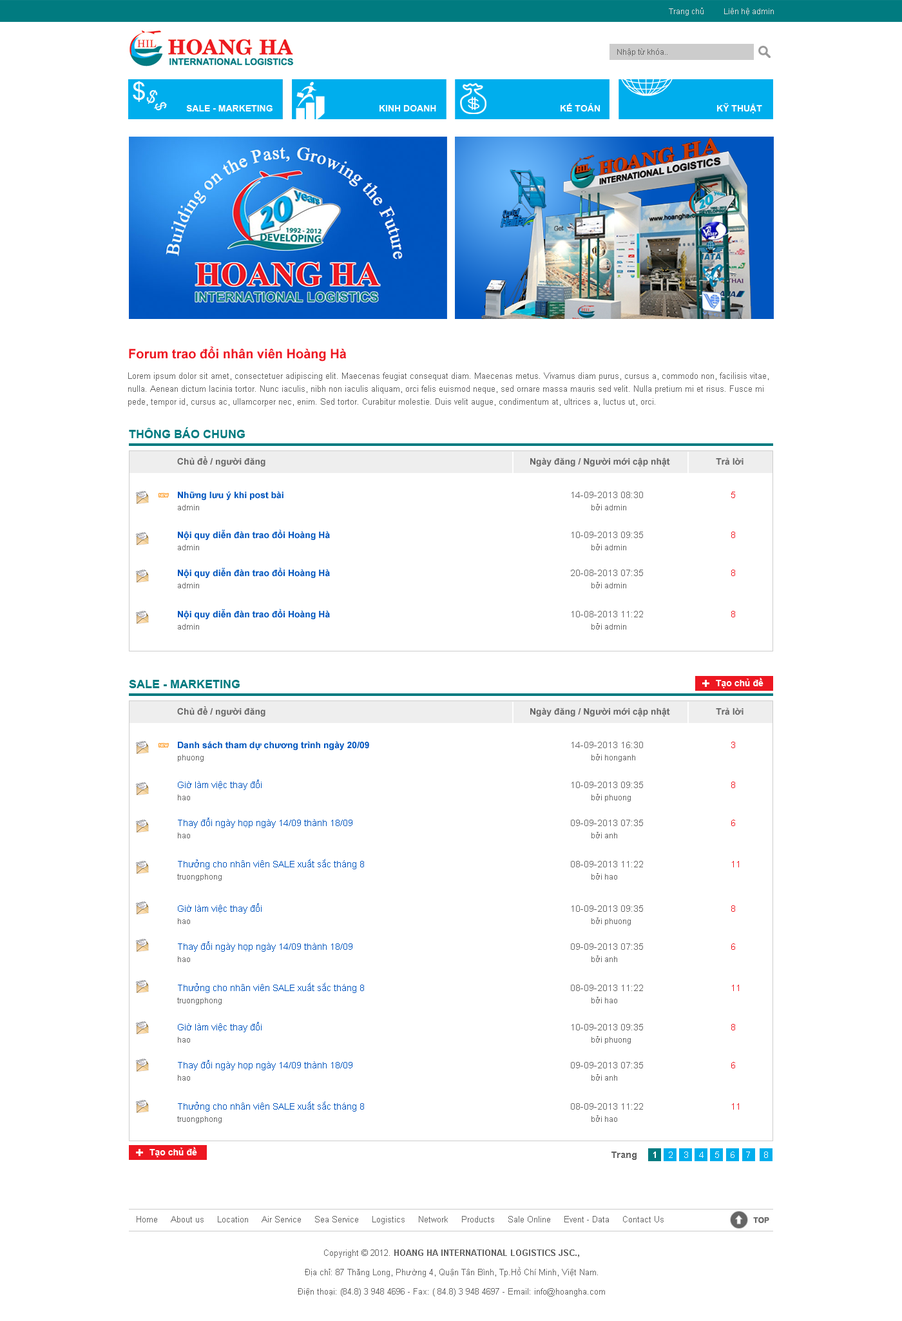
<style>
.page{position:relative;width:902px;height:1321px;background:#ffffff}
.page>*{position:absolute;margin:0}
.t1{font:7.7px "ArialMT";color:#dddddd}
.t2{font:7.7px "ArialMT";color:#666666}
.t3{font:9px "Arial-BoldMT";color:#ffffff}
.t4{font:12.9px "Arial-BoldMT";color:#ed1721}
.t5{font:8.4px/12.9px "ArialMT";color:#666666}
.t6{font:11.6px "Arial-BoldMT";color:#017b80}
.t7{font:9px "Arial-BoldMT";color:#666666}
.t8{font:9px "Arial-BoldMT";color:#0055be}
.t9{font:9px "ArialMT";color:#666666}
.t10{font:9px "ArialMT";color:#f01e27}
.t11{font:15.5px "Arial-BoldMT";color:#fefefe}
.t12{font:9px "Arial-BoldMT";color:#fefefe}
.t13{font:9px "ArialMT";color:#0055be}
.t14{font:9px "ArialMT";color:#ffffff}
.t15{font:8.4px "ArialMT";color:#666666}
.t16{font:8.4px/12.9px "Arial-BoldMT";color:#666666}
</style>
<div class="page">
<p class="t1" style="left:669px;top:8px;width:105px;height:7px">Trang chủ          Liên hệ admin</p>
<p class="t2" style="left:618px;top:48px;width:50px;height:8px">Nhập từ khóa..</p>
<p class="t3" style="left:186px;top:105px;width:87px;height:7px">SALE - MARKETING</p>
<p class="t3" style="left:380px;top:105px;width:56px;height:7px">KINH DOANH</p>
<p class="t3" style="left:561px;top:103px;width:40px;height:9px">KẾ TOÁN</p>
<p class="t3" style="left:717px;top:103px;width:46px;height:10px">KỸ THUẬT</p>
<p class="t4" style="left:129px;top:346px;width:218px;height:16px">Forum trao đổi nhân viên Hoàng Hà</p>
<p class="t5" style="left:128px;top:373px;width:641px;height:34px">Lorem ipsum dolor sit amet, consectetuer adipiscing elit. Maecenas feugiat consequat diam. Maecenas metus. Vivamus diam purus, cursus a, commodo non, facilisis vitae, nulla. Aenean dictum lacinia tortor. Nunc iaculis, nibh non iaculis aliquam, orci felis euismod neque, sed ornare massa mauris sed velit. Nulla pretium mi et risus. Fusce mi pede, tempor id, cursus ac, ullamcorper nec, enim. Sed tortor. Curabitur molestie. Duis velit augue, condimentum at, ultrices a, luctus ut, orci.</p>
<p class="t6" style="left:129px;top:427px;width:116px;height:11px">THÔNG BÁO CHUNG</p>
<p class="t7" style="left:177px;top:456px;width:89px;height:11px">Chủ đề / người đăng</p>
<p class="t7" style="left:530px;top:458px;width:140px;height:9px">Ngày đăng / Người mới cập nhật</p>
<p class="t7" style="left:716px;top:458px;width:28px;height:7px">Trả lời</p>
<p class="t8" style="left:178px;top:491px;width:106px;height:9px">Những lưu ý khi post bài</p>
<p class="t9" style="left:572px;top:492px;width:71px;height:6px">14-09-2013 08:30</p>
<p class="t10" style="left:732px;top:492px;width:3px;height:6px">5</p>
<p class="t2" style="left:178px;top:505px;width:21px;height:6px">admin</p>
<p class="t2" style="left:592px;top:504px;width:35px;height:7px">bởi admin</p>
<p class="t8" style="left:178px;top:530px;width:152px;height:10px">Nội quy diễn đàn trao đổi Hoàng Hà</p>
<p class="t9" style="left:572px;top:532px;width:71px;height:6px">10-09-2013 09:35</p>
<p class="t10" style="left:732px;top:532px;width:3px;height:6px">8</p>
<p class="t2" style="left:178px;top:545px;width:21px;height:5px">admin</p>
<p class="t2" style="left:592px;top:544px;width:35px;height:6px">bởi admin</p>
<p class="t8" style="left:178px;top:568px;width:152px;height:10px">Nội quy diễn đàn trao đổi Hoàng Hà</p>
<p class="t9" style="left:571px;top:570px;width:72px;height:6px">20-08-2013 07:35</p>
<p class="t10" style="left:732px;top:570px;width:3px;height:6px">8</p>
<p class="t2" style="left:178px;top:583px;width:21px;height:6px">admin</p>
<p class="t2" style="left:592px;top:582px;width:35px;height:7px">bởi admin</p>
<p class="t8" style="left:178px;top:609px;width:152px;height:10px">Nội quy diễn đàn trao đổi Hoàng Hà</p>
<p class="t9" style="left:572px;top:611px;width:71px;height:7px">10-08-2013 11:22</p>
<p class="t10" style="left:732px;top:611px;width:3px;height:7px">8</p>
<p class="t2" style="left:178px;top:624px;width:21px;height:6px">admin</p>
<p class="t2" style="left:592px;top:623px;width:35px;height:7px">bởi admin</p>
<p class="t6" style="left:129px;top:680px;width:111px;height:8px">SALE - MARKETING</p>
<p class="t11" style="left:703px;top:680px;width:7px;height:7px">+</p>
<p class="t12" style="left:716px;top:678px;width:48px;height:10px">Tạo chủ đề</p>
<p class="t7" style="left:177px;top:706px;width:89px;height:11px">Chủ đề / người đăng</p>
<p class="t7" style="left:530px;top:708px;width:140px;height:9px">Ngày đăng / Người mới cập nhật</p>
<p class="t7" style="left:716px;top:708px;width:28px;height:7px">Trả lời</p>
<p class="t8" style="left:178px;top:741px;width:191px;height:9px">Danh sách tham dự chương trình ngày 20/09</p>
<p class="t9" style="left:572px;top:742px;width:71px;height:6px">14-09-2013 16:30</p>
<p class="t10" style="left:732px;top:742px;width:3px;height:6px">3</p>
<p class="t2" style="left:178px;top:755px;width:26px;height:7px">phuong</p>
<p class="t2" style="left:592px;top:754px;width:44px;height:8px">bởi honganh</p>
<p class="t13" style="left:178px;top:780px;width:84px;height:10px">Giờ làm việc thay đổi</p>
<p class="t9" style="left:572px;top:782px;width:71px;height:6px">10-09-2013 09:35</p>
<p class="t10" style="left:732px;top:782px;width:3px;height:6px">8</p>
<p class="t2" style="left:178px;top:795px;width:12px;height:6px">hao</p>
<p class="t2" style="left:592px;top:794px;width:39px;height:8px">bởi phuong</p>
<p class="t13" style="left:178px;top:818px;width:175px;height:10px">Thay đổi ngày họp ngày 14/09 thành 18/09</p>
<p class="t9" style="left:571px;top:820px;width:72px;height:6px">09-09-2013 07:35</p>
<p class="t10" style="left:732px;top:820px;width:3px;height:6px">6</p>
<p class="t2" style="left:178px;top:833px;width:12px;height:6px">hao</p>
<p class="t2" style="left:592px;top:832px;width:26px;height:7px">bởi anh</p>
<p class="t13" style="left:178px;top:859px;width:186px;height:11px">Thưởng cho nhân viên SALE xuất sắc tháng 8</p>
<p class="t9" style="left:571px;top:861px;width:72px;height:7px">08-09-2013 11:22</p>
<p class="t10" style="left:732px;top:861px;width:7px;height:7px">11</p>
<p class="t2" style="left:177px;top:874px;width:45px;height:7px">truongphong</p>
<p class="t2" style="left:592px;top:873px;width:26px;height:7px">bởi hao</p>
<p class="t13" style="left:178px;top:904px;width:84px;height:10px">Giờ làm việc thay đổi</p>
<p class="t9" style="left:572px;top:906px;width:71px;height:6px">10-09-2013 09:35</p>
<p class="t10" style="left:732px;top:906px;width:3px;height:6px">8</p>
<p class="t2" style="left:592px;top:918px;width:39px;height:8px">bởi phuong</p>
<p class="t2" style="left:178px;top:919px;width:12px;height:5px">hao</p>
<p class="t13" style="left:178px;top:942px;width:175px;height:10px">Thay đổi ngày họp ngày 14/09 thành 18/09</p>
<p class="t9" style="left:571px;top:944px;width:72px;height:6px">09-09-2013 07:35</p>
<p class="t10" style="left:732px;top:944px;width:3px;height:6px">6</p>
<p class="t2" style="left:178px;top:957px;width:12px;height:5px">hao</p>
<p class="t2" style="left:592px;top:956px;width:26px;height:6px">bởi anh</p>
<p class="t13" style="left:178px;top:983px;width:186px;height:10px">Thưởng cho nhân viên SALE xuất sắc tháng 8</p>
<p class="t9" style="left:571px;top:985px;width:72px;height:6px">08-09-2013 11:22</p>
<p class="t10" style="left:732px;top:985px;width:7px;height:6px">11</p>
<p class="t2" style="left:177px;top:998px;width:45px;height:7px">truongphong</p>
<p class="t2" style="left:592px;top:997px;width:26px;height:7px">bởi hao</p>
<p class="t13" style="left:178px;top:1022px;width:84px;height:11px">Giờ làm việc thay đổi</p>
<p class="t9" style="left:572px;top:1024px;width:71px;height:7px">10-09-2013 09:35</p>
<p class="t10" style="left:732px;top:1024px;width:3px;height:7px">8</p>
<p class="t2" style="left:178px;top:1037px;width:12px;height:6px">hao</p>
<p class="t2" style="left:592px;top:1036px;width:39px;height:8px">bởi phuong</p>
<p class="t13" style="left:178px;top:1060px;width:175px;height:11px">Thay đổi ngày họp ngày 14/09 thành 18/09</p>
<p class="t9" style="left:571px;top:1062px;width:72px;height:7px">09-09-2013 07:35</p>
<p class="t10" style="left:732px;top:1062px;width:3px;height:7px">6</p>
<p class="t2" style="left:178px;top:1075px;width:12px;height:6px">hao</p>
<p class="t2" style="left:592px;top:1075px;width:26px;height:6px">bởi anh</p>
<p class="t13" style="left:178px;top:1102px;width:186px;height:10px">Thưởng cho nhân viên SALE xuất sắc tháng 8</p>
<p class="t9" style="left:571px;top:1104px;width:72px;height:6px">08-09-2013 11:22</p>
<p class="t10" style="left:732px;top:1104px;width:7px;height:6px">11</p>
<p class="t2" style="left:177px;top:1116px;width:45px;height:8px">truongphong</p>
<p class="t2" style="left:592px;top:1116px;width:26px;height:6px">bởi hao</p>
<p class="t11" style="left:136px;top:1149px;width:7px;height:7px">+</p>
<p class="t12" style="left:150px;top:1147px;width:47px;height:11px">Tạo chủ đề</p>
<p class="t14" style="left:612px;top:1152px;width:156px;height:8px"><span class="t7">Trang      </span><span class="t3">1</span>    2    3    4    5    6    7     8</p>
<p class="t15" style="left:137px;top:1216px;width:527px;height:9px">Home     About us     Location     Air Service     Sea Service     Logistics     Network     Products     Sale Online     Event - Data     Contact Us</p>
<p class="t5" style="left:298px;top:1250px;width:307px;height:47px;text-align:center">Copyright © 2012. <span class="t16">HOANG HA INTERNATIONAL LOGISTICS JSC.,<br></span>Địa chỉ: 87 Thăng Long, Phường 4, Quận Tân Bình, Tp.Hồ Chí Minh, Việt Nam.<br>Điện thoại: (84.8) 3 948 4696 - Fax: ( 84.8) 3 948 4697 - Email: info@hoangha.com</p>
</div>
